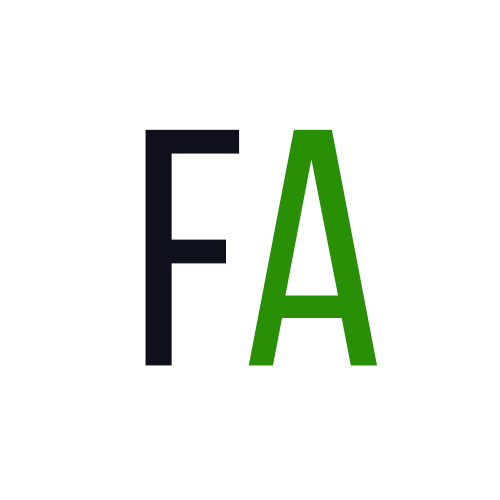
<style>
.page{position:relative;width:500px;height:500px;background:#ffffff}
.page>*{position:absolute;margin:0}
.t1{font:336.8px "BebasNeue-Regular";color:#0e101c}
.t2{font:336.8px "BebasNeue-Regular";color:#299006}
</style>
<div class="page">
<p class="t1" style="left:145px;top:129px;width:233px;height:237px">F<span class="t2">A</span></p>
</div>
